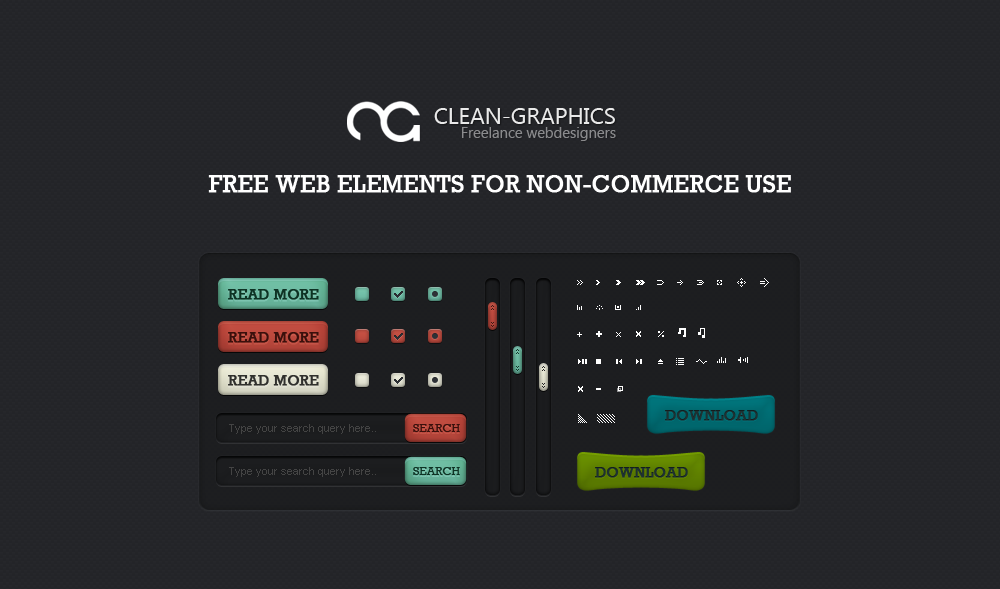
<style>
.page{position:relative;width:1000px;height:589px;background:#232428}
.page>*{position:absolute;margin:0}
.t1{font:24px "Rockwell";color:#ffffff;text-transform:uppercase;font-weight:bold}
.t2{font:15px "Rockwell";color:#092e32;text-transform:uppercase;font-weight:bold}
.t3{font:15px "Rockwell";color:#3a100c;text-transform:uppercase;font-weight:bold}
.t4{font:15px "Rockwell";color:#30302d;text-transform:uppercase;font-weight:bold}
.t5{font:11px "ArialMT";color:#444444}
.t6{font:12px "Rockwell";color:#3a100c;text-transform:uppercase}
.t7{font:12px "Rockwell";color:#092e32;text-transform:uppercase}
</style>
<div class="page">
<p class="t1" style="left:208px;top:175px;width:583px;height:18px">Free web elements for non-commerce use</p>
<p class="t2" style="left:228px;top:289px;width:91px;height:11px">Read More</p>
<p class="t3" style="left:228px;top:332px;width:91px;height:11px">Read More</p>
<p class="t4" style="left:228px;top:375px;width:91px;height:11px">Read More</p>
<p class="t2" style="left:665px;top:410px;width:93px;height:11px">DOWNLOAD</p>
<p class="t5" style="left:229px;top:424px;width:147px;height:10px">Type your search query here..</p>
<p class="t6" style="left:413px;top:424px;width:47px;height:8px">SEARCH</p>
<p class="t5" style="left:229px;top:467px;width:147px;height:10px">Type your search query here..</p>
<p class="t7" style="left:413px;top:467px;width:47px;height:8px">SEARCH</p>
<p class="t2" style="left:595px;top:467px;width:93px;height:11px">DOWNLOAD</p>
</div>
